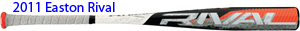
<style>
.page{position:relative;width:300px;height:31px;background:#ffffff}
.page>*{position:absolute;margin:0}
.t1{font:14px "MyriadPro-Regular";color:#0000ff}
</style>
<div class="page">
<p class="t1" style="left:13px;top:2px;width:102px;height:10px">2011 Easton Rival</p>
</div>
